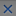
<style>
.page{position:relative;width:16px;height:16px;background:#808080}
.page>*{position:absolute;margin:0}
.t1{font:18px "HiraKakuProN-W3";color:#153b75}
</style>
<div class="page">
<p class="t1" style="left:3px;top:4px;width:10px;height:10px">×</p>
</div>
